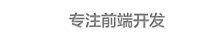
<style>
.page{position:relative;width:220px;height:40px;background:#ffffff}
.page>*{position:absolute;margin:0}
.t1{font:16px "FZLTZHK--GBK1-0";color:#737373}
</style>
<div class="page">
<p class="t1" style="left:69px;top:12px;width:96px;height:16px">专注前端开发</p>
</div>
